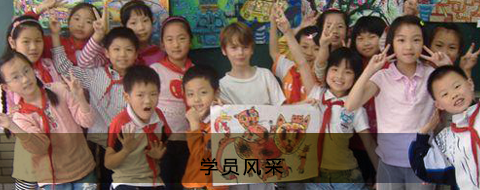
<style>
.page{position:relative;width:480px;height:190px}
.page>*{position:absolute;margin:0}
.t1{font:18px "MicrosoftYaHei";letter-spacing:0.2em;color:#000000}
</style>
<div class="page">
<p class="t1" style="left:200px;top:157px;width:83px;height:19px">学员风采</p>
</div>
